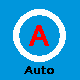
<style>
.page{position:relative;width:80px;height:80px;background:#0096dc}
.page>*{position:absolute;margin:0}
.t1{font:26.7px "MicrosoftYaHei";color:#ff0000;font-weight:bold}
.t2{font:11.1px "MicrosoftYaHei";color:#000000;font-weight:bold}
</style>
<div class="page">
<p class="t1" style="left:29px;top:25px;width:20px;height:21px">A</p>
<p class="t2" style="left:24px;top:66px;width:30px;height:8px">Auto</p>
</div>
